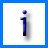
<style>
.page{position:relative;width:48px;height:48px;background:#ffffff}
.page>*{position:absolute;margin:0}
.t1{font:36px "TrebuchetMS"}
</style>
<div class="page">
<p class="t1" style="left:20px;top:10px;width:7px;height:26px">i</p>
</div>
